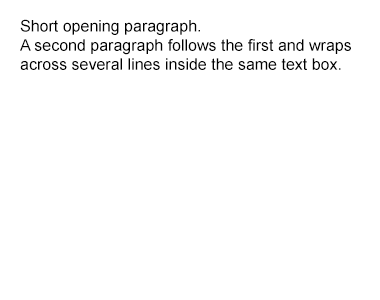
<style>
.page{position:relative;width:380px;height:300px;background:#ffffff}
.page>*{position:absolute;margin:0}
.t1{font:16px "ArialMT";color:#000000}
</style>
<div class="page">
<p class="t1" style="left:20px;top:19px;width:331px;height:51px">Short opening paragraph.<br>A second paragraph follows the first and wraps across several lines inside the same text box.</p>
</div>
